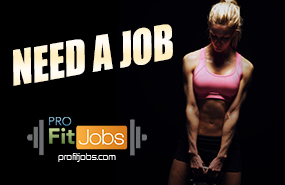
<style>
.page{position:relative;width:285px;height:185px;background:#000000}
.page>*{position:absolute;margin:0}
.t1{font:44.4px "Impact";text-transform:uppercase;font-style:italic;scale:0.88 1}
.t2{font:10.2px "ContinuumLight";color:#ffffff}
</style>
<div class="page">
<p class="t1" style="left:13px;top:24px;width:160px;height:62px;rotate:-10deg">Need a job</p>
<p class="t2" style="left:58px;top:153px;width:58px;height:9px">profitjobs.com</p>
</div>
